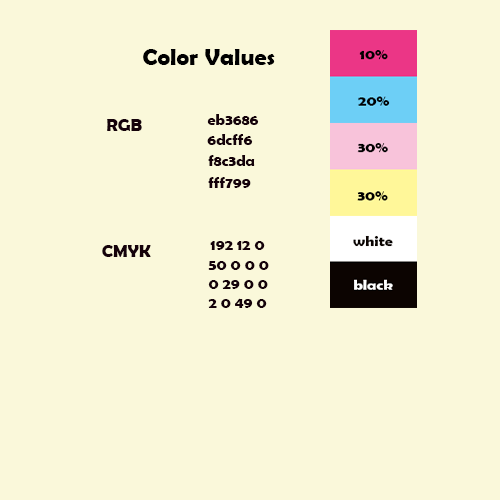
<style>
.page{position:relative;width:500px;height:500px;background:#faf8da}
.page>*{position:absolute;margin:0}
.t1{font:24px "BerlinSansFBDemi-Bold";color:#000000}
.t2{font:18px "BerlinSansFBDemi-Bold";color:#15020a}
.t3{font:16px "BerlinSansFBDemi-Bold";color:#15020a}
</style>
<div class="page">
<p class="t1" style="left:143px;top:49px;width:132px;height:16px">Color Values</p>
<p class="t2" style="left:107px;top:119px;width:35px;height:12px">RGB</p>
<p class="t3" style="left:207px;top:114px;width:52px;height:11px">eb3686</p>
<p class="t3" style="left:207px;top:134px;width:46px;height:11px">6dcff6</p>
<p class="t3" style="left:208px;top:155px;width:47px;height:11px">f8c3da</p>
<p class="t3" style="left:208px;top:177px;width:43px;height:11px">fff799</p>
<p class="t2" style="left:102px;top:245px;width:49px;height:12px">CMYK</p>
<p class="t3" style="left:210px;top:241px;width:55px;height:9px">192 12 0</p>
<p class="t3" style="left:208px;top:261px;width:61px;height:47px">50 0 0 0<br>0 29 0 0<br>2 0 49 0</p>
</div>
